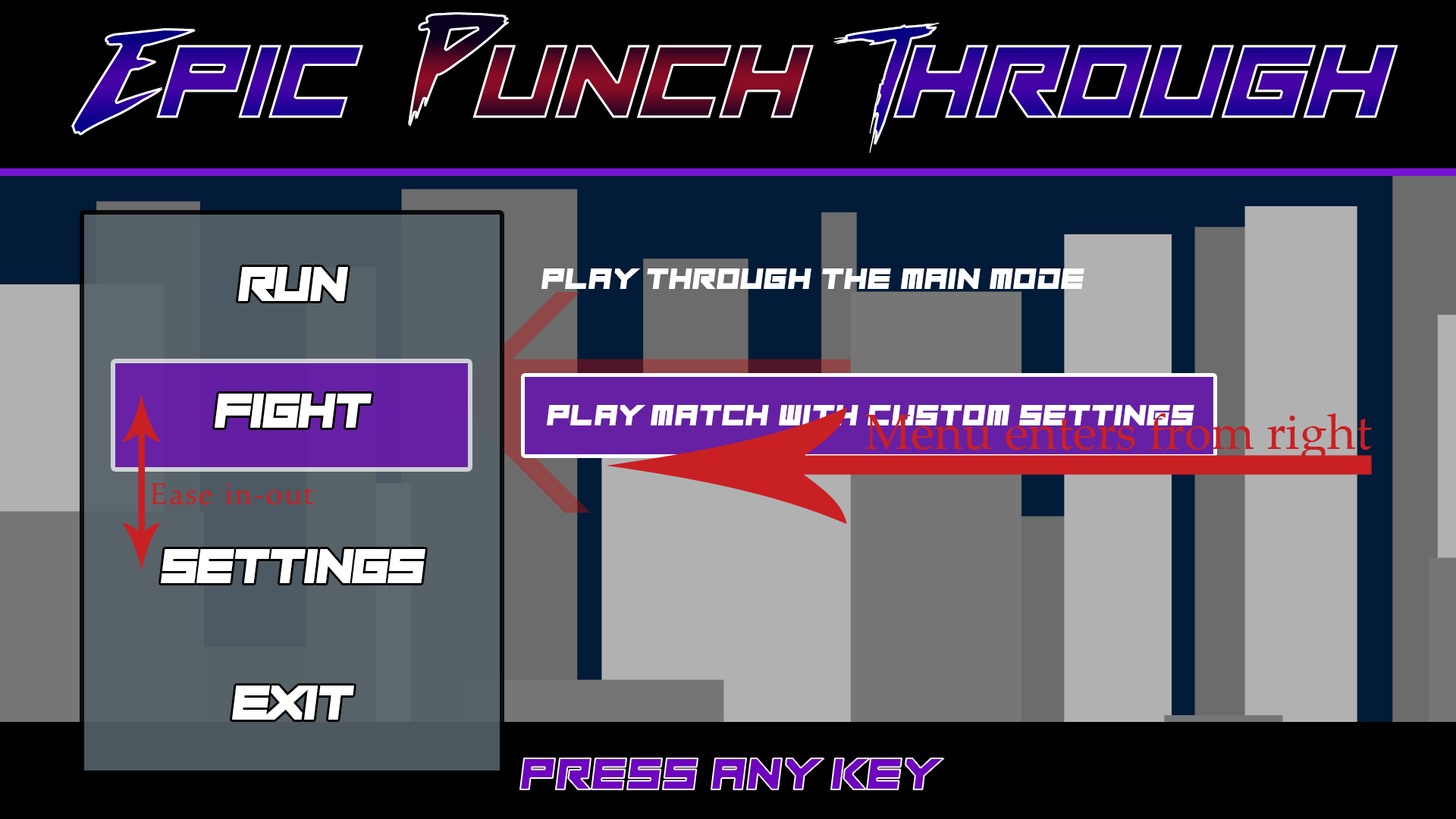
<style>
.page{position:relative;width:1456px;height:819px;background:#000000}
.page>*{position:absolute;margin:0}
.t1{font:106.2px "PlayPretend";letter-spacing:0.04em;font-style:italic}
.t2{font:106.2px "outrunfuture";letter-spacing:-0.16em}
.t3{font:106.2px "outrunfuture";letter-spacing:-0.16em;font-style:italic}
.t4{font:49px "PlayPretend";color:#ffffff}
.t5{font:30.3px "PlayPretend";letter-spacing:0.05em;color:#ffffff}
.t6{font:45.5px "PlayPretend";letter-spacing:0.05em;color:#6d04be}
</style>
<div class="page">
<p class="t1" style="left:71px;top:12px;width:1327px;height:141px"><span class="t2">E</span>PIC  <span class="t2">P</span>UNCH <span class="t3">T</span>HROUGH</p>
<p class="t4" style="left:238px;top:267px;width:110px;height:34px">Run</p>
<p class="t5" style="left:541px;top:268px;width:543px;height:21px">Play through the main mode</p>
<p class="t4" style="left:215px;top:394px;width:157px;height:34px">Fight</p>
<p class="t5" style="left:547px;top:405px;width:647px;height:20px">Play Match with custom settings</p>
<p class="t4" style="left:161px;top:549px;width:264px;height:34px">Settings</p>
<p class="t4" style="left:232px;top:686px;width:122px;height:34px">Exit</p>
<p class="t6" style="left:520px;top:758px;width:424px;height:31px">Press Any key</p>
</div>
